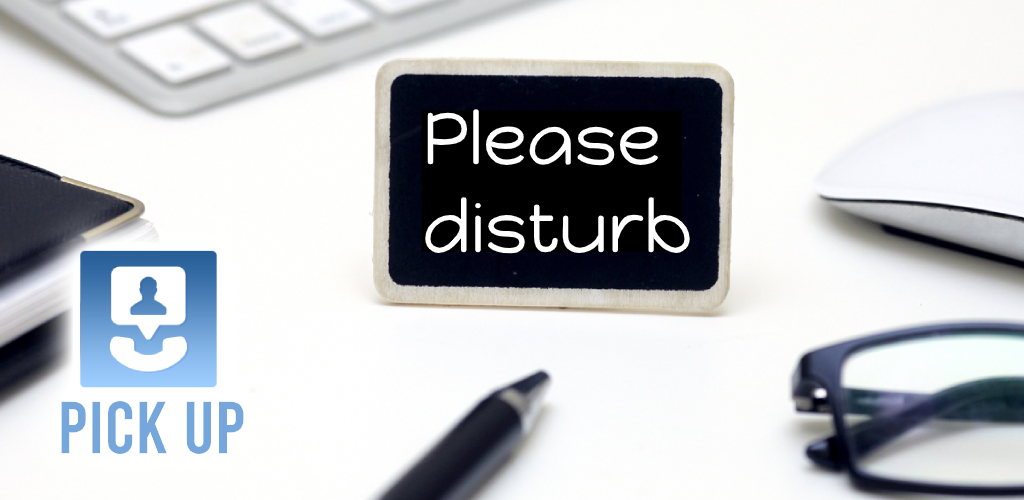
<style>
.page{position:relative;width:1024px;height:500px}
.page>*{position:absolute;margin:0}
.t1{font:73.4px "HappyMonkey-Regular";color:#ffffff}
.t2{font:73.4px "Bebas-Regular";color:#76a7dc}
</style>
<div class="page">
<p class="t1" style="left:425px;top:109px;width:265px;height:145px">Please<br>disturb</p>
<p class="t2" style="left:61px;top:401px;width:183px;height:53px">Pick Up</p>
</div>
